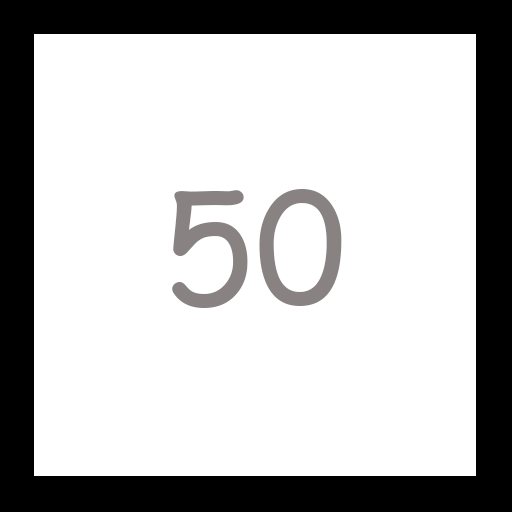
<style>
.page{position:relative;width:512px;height:512px;background:#ffffff}
.page>*{position:absolute;margin:0}
.t1{font:150px "ComicSansMS";color:#898282}
</style>
<div class="page">
<p class="t1" style="left:172px;top:189px;width:170px;height:119px">50</p>
</div>
